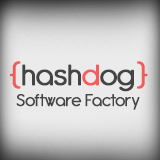
<style>
.page{position:relative;width:160px;height:160px;background:#ebebeb}
.page>*{position:absolute;margin:0}
.t1{font:32px "Antipasto";color:#444444;font-weight:bold}
.t2{font:32px "Antipasto";color:#f85d5d;font-weight:bold}
.t3{font:18.7px "Antipasto";color:#444444;font-weight:bold}
</style>
<div class="page">
<p class="t1" style="left:10px;top:61px;width:138px;height:31px"><span class="t2">{</span>hash<span class="t2">d</span>og<span class="t2">}</span></p>
<p class="t3" style="left:16px;top:94px;width:124px;height:16px">Software Factory</p>
</div>
